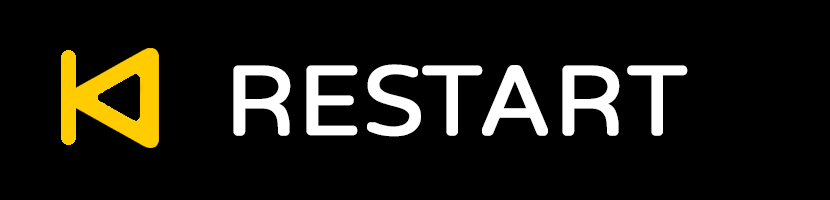
<style>
.page{position:relative;width:830px;height:200px;background:#000000}
.page>*{position:absolute;margin:0}
.t1{font:98px "VarelaRound-Regular";color:#ffffff;font-weight:bold}
</style>
<div class="page">
<p class="t1" style="left:233px;top:64px;width:455px;height:73px">RESTART</p>
</div>
